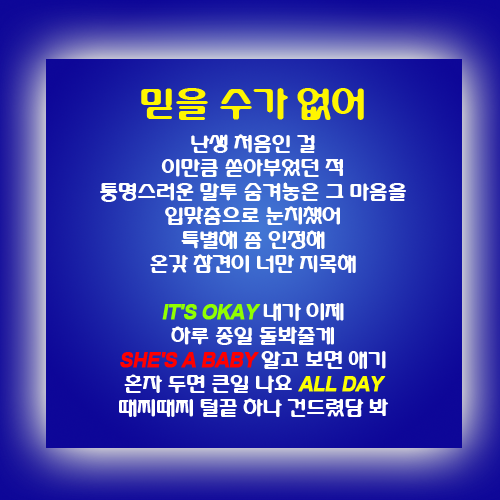
<style>
.page{position:relative;width:500px;height:500px}
.page>*{position:absolute;margin:0}
.t1{font:20px/24px "HYdnkB";letter-spacing:-0.05em;color:#ffffff}
.t2{font:36px/48px "HYdnkB";letter-spacing:-0.05em;color:#fff600}
.t3{font:20px/24px "Arial-BoldMT";letter-spacing:-0.05em;color:#90ff00;text-transform:uppercase;font-weight:bold;font-style:italic}
.t4{font:20px/24px "Arial-BoldMT";letter-spacing:-0.05em;color:#ff0000;text-transform:uppercase;font-weight:bold;font-style:italic}
.t5{font:20px/24px "Arial-BoldMT";letter-spacing:-0.05em;color:#fcff00;text-transform:uppercase;font-weight:bold;font-style:italic}
</style>
<div class="page">
<p class="t1" style="left:100px;top:88px;width:306px;height:329px;text-align:center"><span class="t2">믿을 수가 없어<br></span>난생 처음인 걸<br>이만큼 쏟아부었던 적<br>퉁명스러운 말투 숨겨놓은 그 마음을<br>입맞춤으로 눈치챘어<br>특별해 좀 인정해<br>온갖 참견이 너만 지목해<br><br><span class="t3">It's okay</span> 내가 이제<br>하루 종일 돌봐줄게<br><span class="t4">She's a baby</span> 알고 보면 애기<br>혼자 두면 큰일 나요 <span class="t5">All day<br></span>때찌때찌 털끝 하나 건드렸담 봐</p>
</div>
